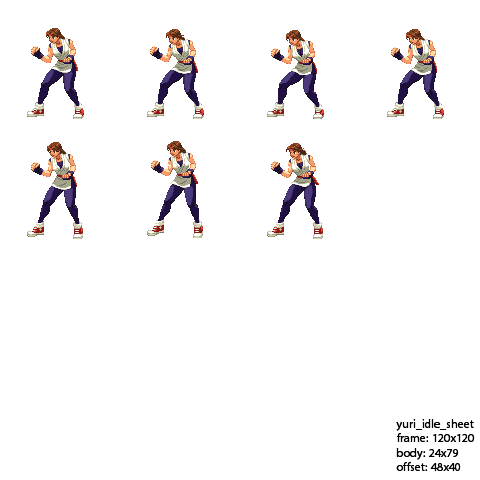
<style>
.page{position:relative;width:480px;height:480px;background:#ffffff}
.page>*{position:absolute;margin:0}
.t1{font:12px "MyriadHebrew-Regular";color:#000000}
</style>
<div class="page">
<p class="t1" style="left:396px;top:419px;width:79px;height:53px;text-align:right">yuri_idle_sheet<br>frame: 120x120<br>body: 24x79<br>offset: 48x40</p>
</div>
